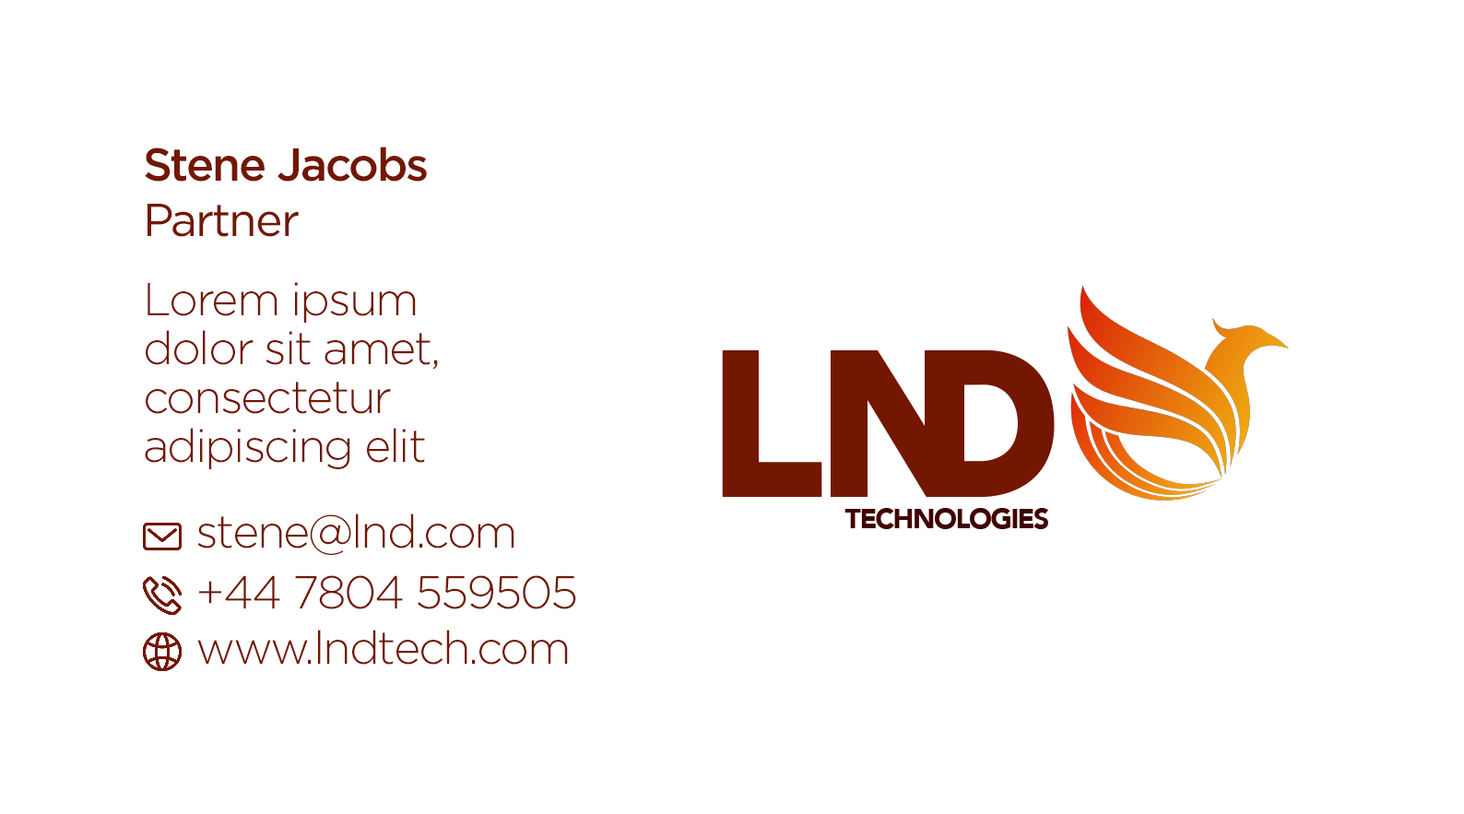
<style>
.page{position:relative;width:1464px;height:814px;background:#ffffff}
.page>*{position:absolute;margin:0}
.t1{font:46.1px/48.9px "Gotham-Light";letter-spacing:-0.043em;color:#731702}
.t2{font:46.1px/55.1px "Gotham-Medium";letter-spacing:-0.043em;color:#731702}
.t3{font:46.1px/55.1px "Gotham-Book";letter-spacing:-0.043em;color:#731702}
.t4{font:46.1px/24.4px "Gotham-Light";letter-spacing:-0.043em;color:#731702}
.t5{font:46.1px/36.7px "Gotham-Light";letter-spacing:-0.043em;color:#731702}
.t6{font:46.1px/30.5px "Gotham-Light";letter-spacing:-0.043em;color:#731702}
</style>
<div class="page">
<p class="t1" style="left:145px;top:147px;width:431px;height:518px"><span class="t2">Stene Jacobs<br></span><span class="t3">Partner<br><br></span><span class="t4">Lorem ipsum<br></span>dolor sit amet, consectetur<br>adipiscing elit<br><span class="t5"><br>  </span><span class="t6">stene@lnd.com<br>  <br>  +44 7804 559505<br><br> </span><span class="t4"> www.lndtech.com</span></p>
</div>
